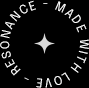
<style>
.page{position:relative;width:89px;height:88px;background:#000000}
.page>*{position:absolute;margin:0}
.t1{font:12px/24px "Epilogue-Regular";letter-spacing:0.12em;color:#ffffff;text-transform:uppercase}
</style>
<div class="page">
<p class="t1" style="left:0px;top:0px;width:89px;height:88px">Made With Love - Resonance -</p>
</div>
